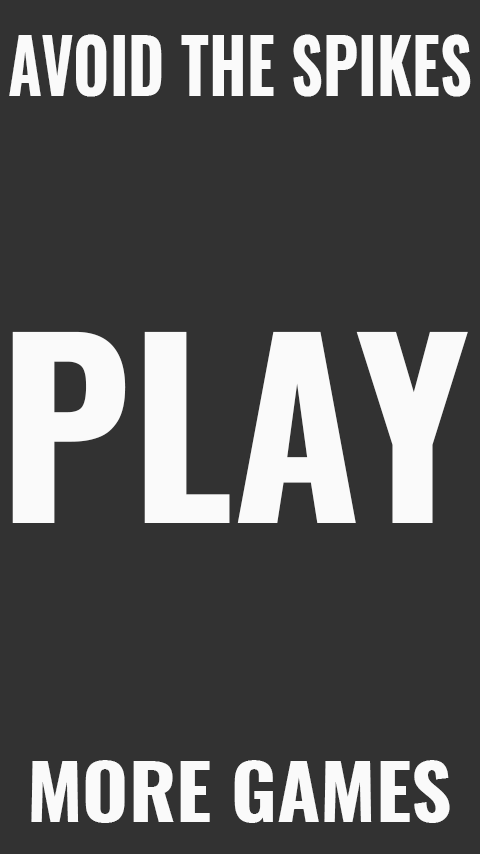
<style>
.page{position:relative;width:480px;height:854px;background:#323232}
.page>*{position:absolute;margin:0}
.t1{font:73.7px "Oswald-Bold";color:#fafafa;scale:0.85 1}
.t2{font:236px "Oswald-Bold";color:#fafafa}
.t3{font:74.4px "Oswald-Bold";color:#fafafa;scale:1.06 1}
</style>
<div class="page">
<p class="t1" style="left:9px;top:34px;width:462px;height:63px">AVOID THE SPIKES</p>
<p class="t2" style="left:12px;top:331px;width:456px;height:192px">PLAY</p>
<p class="t3" style="left:31px;top:760px;width:419px;height:63px">MORE GAMES</p>
</div>
